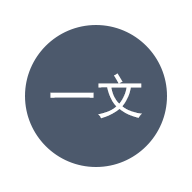
<style>
.page{position:relative;width:192px;height:192px;background:#ffffff}
.page>*{position:absolute;margin:0}
.t1{font:48px "SimHei";color:#ffffff}
</style>
<div class="page">
<p class="t1" style="left:50px;top:73px;width:92px;height:46px">一文</p>
</div>
